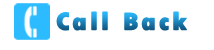
<style>
.page{position:relative;width:214px;height:50px;background:#ffffff}
.page>*{position:absolute;margin:0}
.t1{font:25.5px "TwCenMT-CondensedExtraBold";letter-spacing:0.075em;font-weight:bold;scale:1.2 1}
</style>
<div class="page">
<p class="t1" style="left:56px;top:11px;width:131px;height:20px">Call Back</p>
</div>
